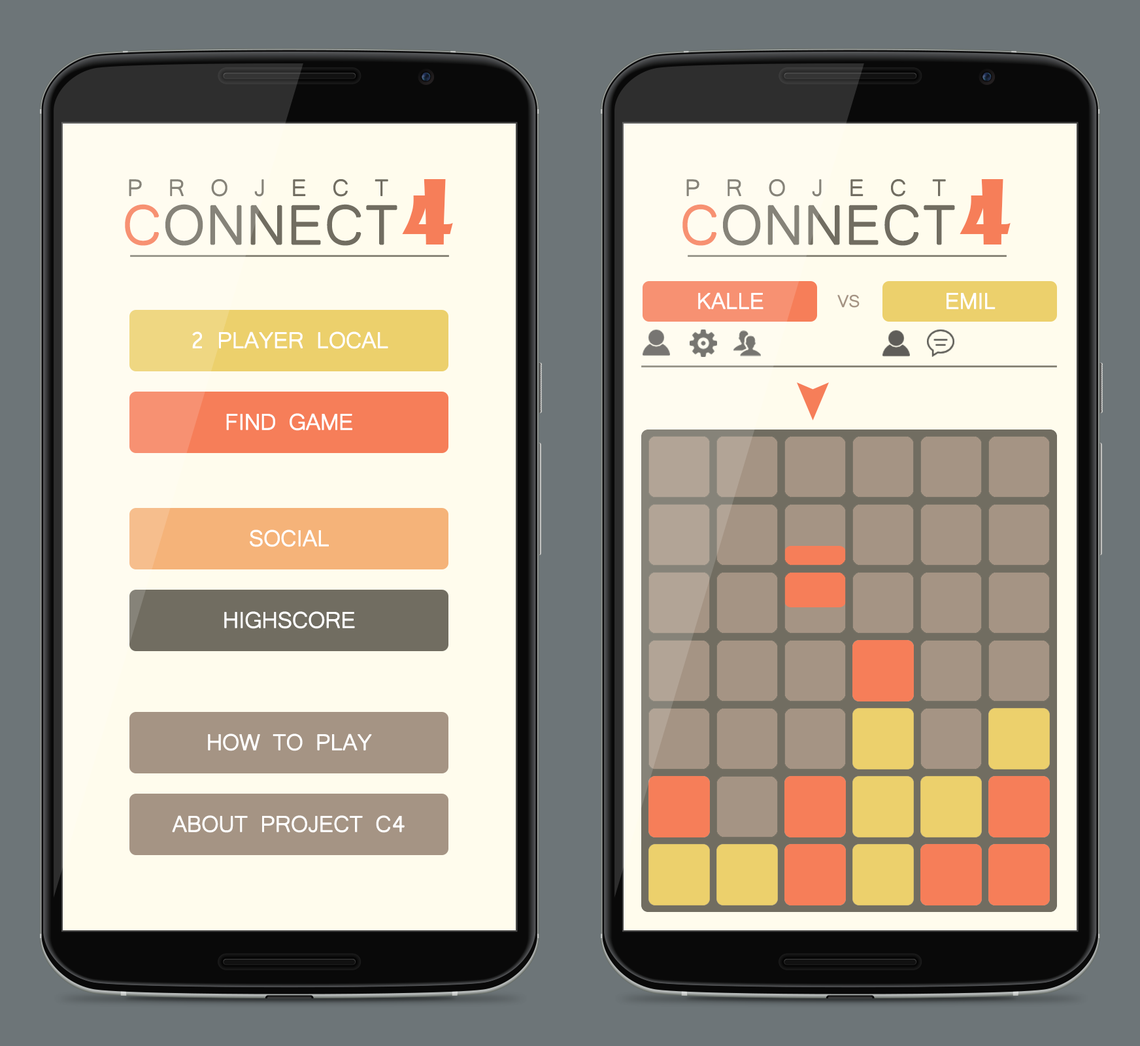
<style>
.page{position:relative;width:1140px;height:1046px}
.page>*{position:absolute;margin:0}
.t1{font:29.5px "Microsoft-Yi-Baiti";letter-spacing:0.855em;color:#716d61;text-transform:uppercase;font-weight:bold}
.t2{font:86.8px "ShowcardGothic-Reg";color:#f67e59;text-transform:uppercase}
.t3{font:70.3px "Microsoft-Yi-Baiti";color:#716d61;text-transform:uppercase;font-weight:bold}
.t4{font:70.3px "Microsoft-Yi-Baiti";color:#f67e59;text-transform:uppercase;font-weight:bold}
.t5{font:28.8px "Microsoft-Yi-Baiti";letter-spacing:-0.025em;color:#ffffff;text-transform:uppercase;font-weight:bold}
.t6{font:21.5px "Microsoft-Yi-Baiti";letter-spacing:-0.025em;color:#a59484;text-transform:uppercase;font-weight:bold}
</style>
<div class="page">
<p class="t1" style="left:129px;top:179px;width:259px;height:18px">project</p>
<p class="t2" style="left:402px;top:179px;width:51px;height:65px">4</p>
<p class="t1" style="left:686px;top:179px;width:260px;height:18px">project</p>
<p class="t2" style="left:960px;top:179px;width:51px;height:65px">4</p>
<p class="t3" style="left:125px;top:204px;width:272px;height:42px"><span class="t4">c</span>onnect</p>
<p class="t3" style="left:682px;top:204px;width:273px;height:42px"><span class="t4">c</span>onnect</p>
<p class="t5" style="left:698px;top:292px;width:66px;height:17px">Kalle</p>
<p class="t5" style="left:947px;top:293px;width:49px;height:16px">Emil</p>
<p class="t6" style="left:837px;top:294px;width:23px;height:14px">vs</p>
<p class="t5" style="left:192px;top:331px;width:196px;height:18px">2 Player Local</p>
<p class="t5" style="left:226px;top:413px;width:126px;height:18px">find game</p>
<p class="t5" style="left:250px;top:530px;width:79px;height:17px">Social</p>
<p class="t5" style="left:224px;top:611px;width:131px;height:18px">Highscore</p>
<p class="t5" style="left:208px;top:733px;width:164px;height:18px">How to play</p>
<p class="t5" style="left:172px;top:815px;width:233px;height:18px">About Project C4</p>
</div>
